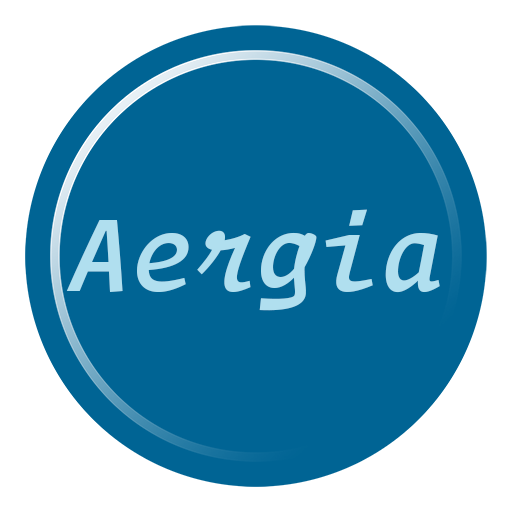
<style>
.page{position:relative;width:512px;height:512px;background:#006494}
.page>*{position:absolute;margin:0}
.t1{font:113.8px "OperatorMono-MediumItalic";color:#b0dfef}
</style>
<div class="page">
<p class="t1" style="left:66px;top:209px;width:374px;height:102px">Aergia</p>
</div>
